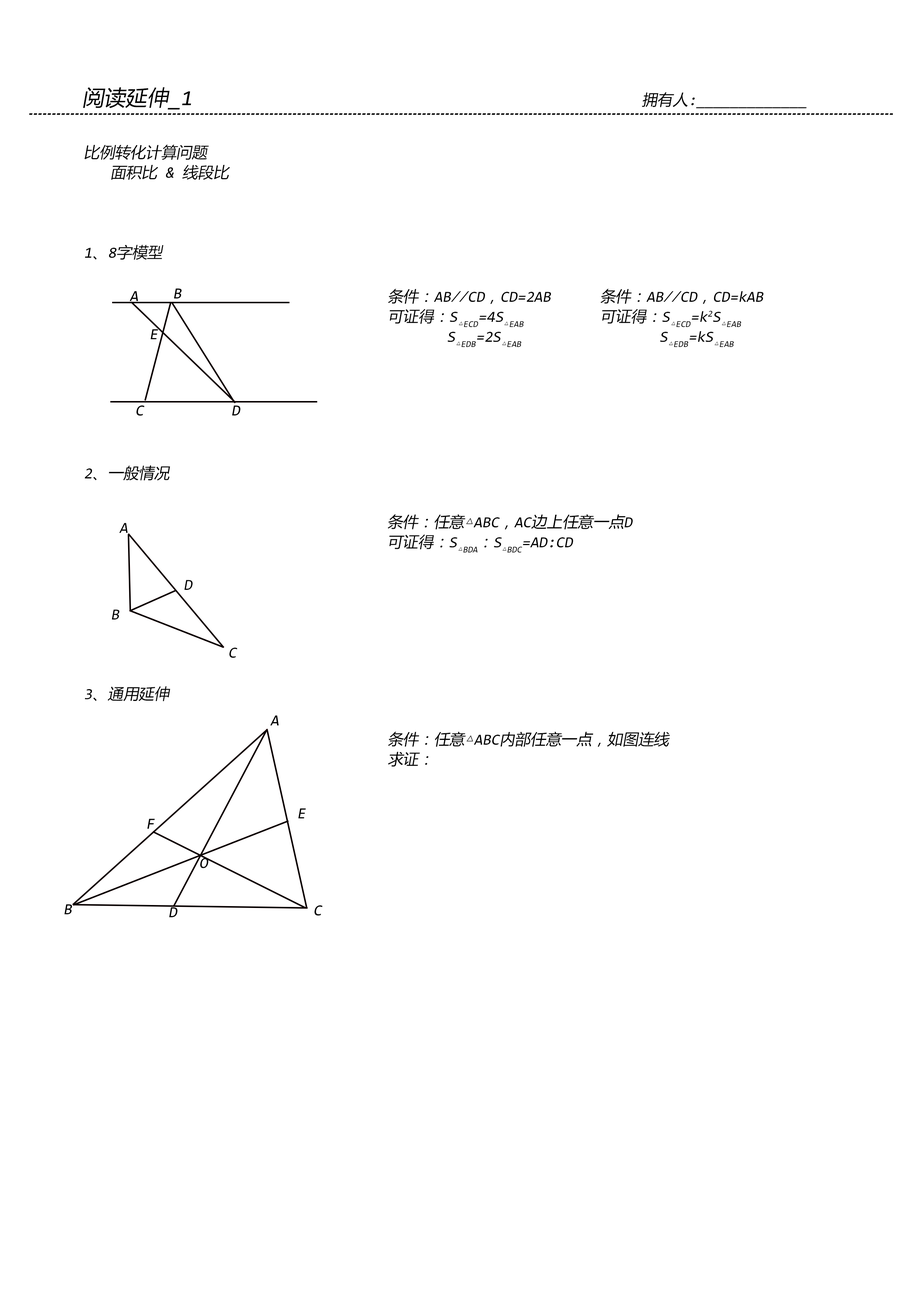
<style>
.page{position:relative;width:918px;height:1299px;background:#ffffff}
.page>*{position:absolute;margin:0}
.t1{font:15.4px "YaHei-Consolas-Hybrid";color:#000000;font-style:italic}
.t2{font:21.6px "YaHei-Consolas-Hybrid";color:#000000;font-style:italic}
.t3{font:15.4px/20.1px "YaHei-Consolas-Hybrid";color:#000000;font-style:italic}
</style>
<div class="page">
<p class="t1" style="left:83px;top:87px;width:724px;height:23px"><span class="t2">阅读延伸_1</span>                                  拥有人:_____________</p>
<p class="t3" style="left:84px;top:145px;width:146px;height:556px">比例转化计算问题<br>  面积比 &amp; 线段比<br><br><br><br>1、8字模型<br><br><br><br><br><br><br><br><br><br><br>2、一般情况<br><br><br><br><br><br><br><br><br><br><br>3、通用延伸</p>
<p class="t3" style="left:388px;top:289px;width:163px;height:58px">条件：AB//CD，CD=2AB<br>可证得：S△ECD=4S△EAB<br>       S△EDB=2S△EAB</p>
<p class="t3" style="left:600px;top:289px;width:164px;height:58px">条件：AB//CD，CD=kAB<br>可证得：S△ECD=k2S△EAB<br>       S△EDB=kS△EAB</p>
<p class="t3" style="left:388px;top:514px;width:245px;height:39px">条件：任意△ABC，AC边上任意一点D<br>可证得：S△BDA：S△BDC=AD:CD</p>
<p class="t1" style="left:119px;top:523px;width:9px;height:10px">A</p>
<p class="t1" style="left:184px;top:580px;width:9px;height:10px">D</p>
<p class="t1" style="left:112px;top:609px;width:8px;height:10px">B</p>
<p class="t1" style="left:229px;top:648px;width:8px;height:10px">C</p>
<p class="t3" style="left:388px;top:731px;width:282px;height:35px">条件：任意△ABC内部任意一点，如图连线<br>求证：</p>
</div>
